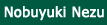
<style>
.page{position:relative;width:107px;height:25px;background:#005941}
.page>*{position:absolute;margin:0}
.t1{font:14px "Tahoma";letter-spacing:0.02em;color:#ffffff;font-weight:bold}
</style>
<div class="page">
<p class="t1" style="left:4px;top:6px;width:100px;height:15px">Nobuyuki Nezu</p>
</div>
